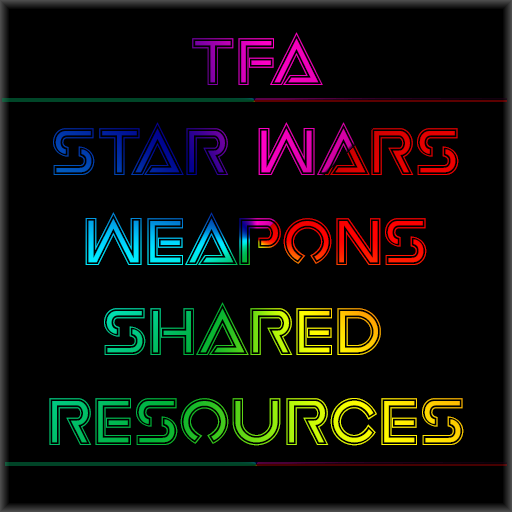
<style>
.page{position:relative;width:512px;height:512px;background:#000000}
.page>*{position:absolute;margin:0}
.t1{font:75px "EarthOrbiterAcademy"}
</style>
<div class="page">
<p class="t1" style="left:49px;top:32px;width:415px;height:414px;text-align:center">Tfa<br>Star Wars<br>Weapons<br>Shared <br>Resources</p>
</div>
